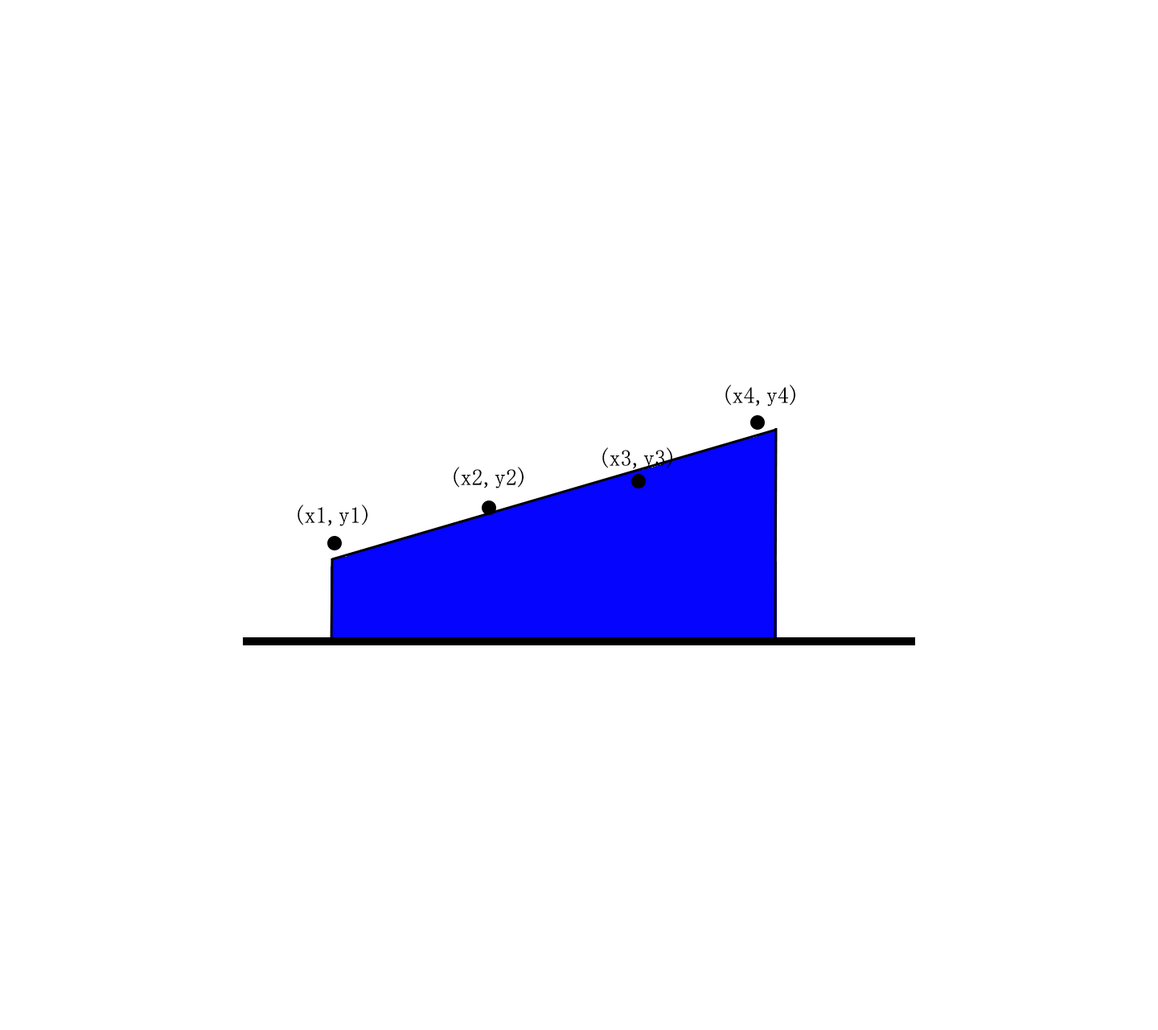
<style>
.page{position:relative;width:1158px;height:1030px;background:#ffffff}
.page>*{position:absolute;margin:0}
.t1{font:22.7px "SimSun";color:#000000}
</style>
<div class="page">
<p class="t1" style="left:725px;top:384px;width:70px;height:22px">(x4,y4)</p>
<p class="t1" style="left:602px;top:447px;width:70px;height:22px">(x3,y3)</p>
<p class="t1" style="left:454px;top:467px;width:70px;height:21px">(x2,y2)</p>
<p class="t1" style="left:298px;top:504px;width:70px;height:22px">(x1,y1)</p>
</div>
